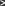
<style>
.page{position:relative;width:5px;height:6px;background:#333333}
.page>*{position:absolute;margin:0}
.t1{font:12px "ArialNarrow";letter-spacing:0.01em}
</style>
<div class="page">
<p class="t1" style="left:0px;top:0px;width:5px;height:6px">&gt;</p>
</div>
